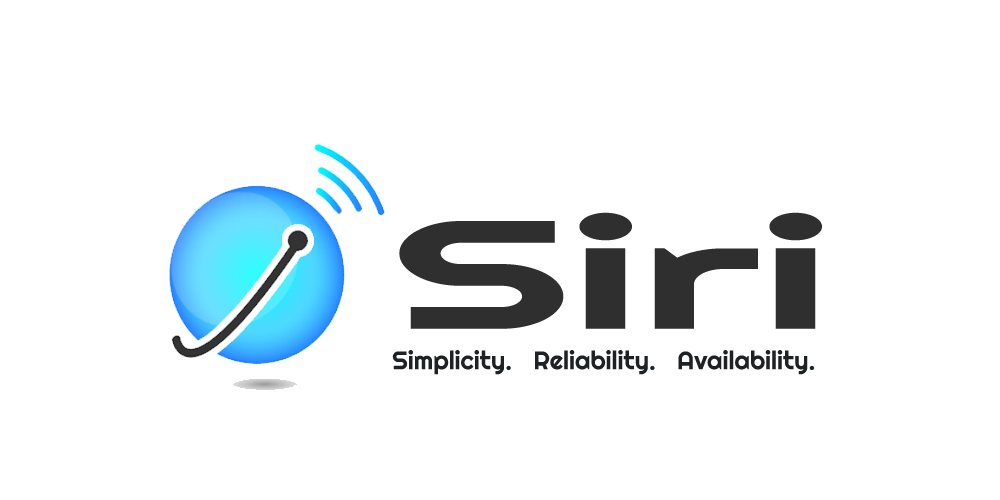
<style>
.page{position:relative;width:1000px;height:500px;background:#ffffff}
.page>*{position:absolute;margin:0}
.t1{font:153.6px "Righteous-Regular";color:#2f2f2f;scale:1.9 1}
.t2{font:25.4px "Righteous-Regular";color:#1e2225}
</style>
<div class="page">
<p class="t1" style="left:399px;top:212px;width:423px;height:117px">Siri</p>
<p class="t2" style="left:392px;top:350px;width:422px;height:25px">Simplicity.   Reliability.   Availability.</p>
</div>
